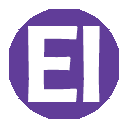
<style>
.page{position:relative;width:128px;height:128px;background:#ffffff}
.page>*{position:absolute;margin:0}
.t1{font:118.1px "AlegreyaSans-Bold";letter-spacing:-0.039em;color:#ffffff}
</style>
<div class="page">
<p class="t1" style="left:28px;top:26px;width:72px;height:76px">EI</p>
</div>
